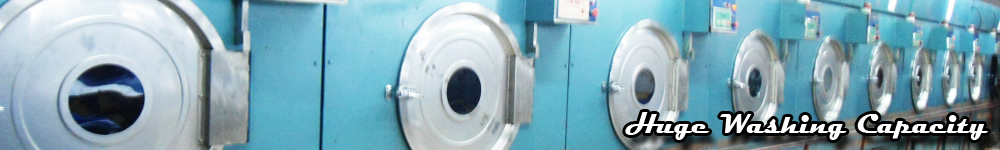
<style>
.page{position:relative;width:1000px;height:150px}
.page>*{position:absolute;margin:0}
.t1{font:27.8px "Magneto-Bold";color:#ffffff}
</style>
<div class="page">
<p class="t1" style="left:625px;top:112px;width:363px;height:28px">Huge Washing Capacity</p>
</div>
